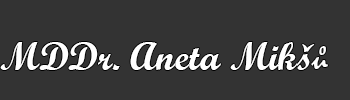
<style>
.page{position:relative;width:350px;height:100px;background:#333333}
.page>*{position:absolute;margin:0}
.t1{font:38.9px "ScriptMTBold";color:#ffffff}
.t2{font:38.9px "Mistral";color:#ffffff}
</style>
<div class="page">
<p class="t1" style="left:0px;top:42px;width:328px;height:28px">MDDr. Aneta Mikš<span class="t2">ů</span></p>
</div>
